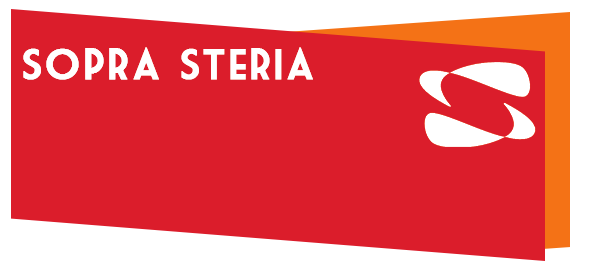
<style>
.page{position:relative;width:592px;height:270px;background:#db1d2b}
.page>*{position:absolute;margin:0}
.t1{font:41.7px "MarketDeco";letter-spacing:0.03em;color:#ffffff;font-weight:bold}
</style>
<div class="page">
<p class="t1" style="left:23px;top:47px;width:290px;height:33px">Sopra Steria</p>
</div>
